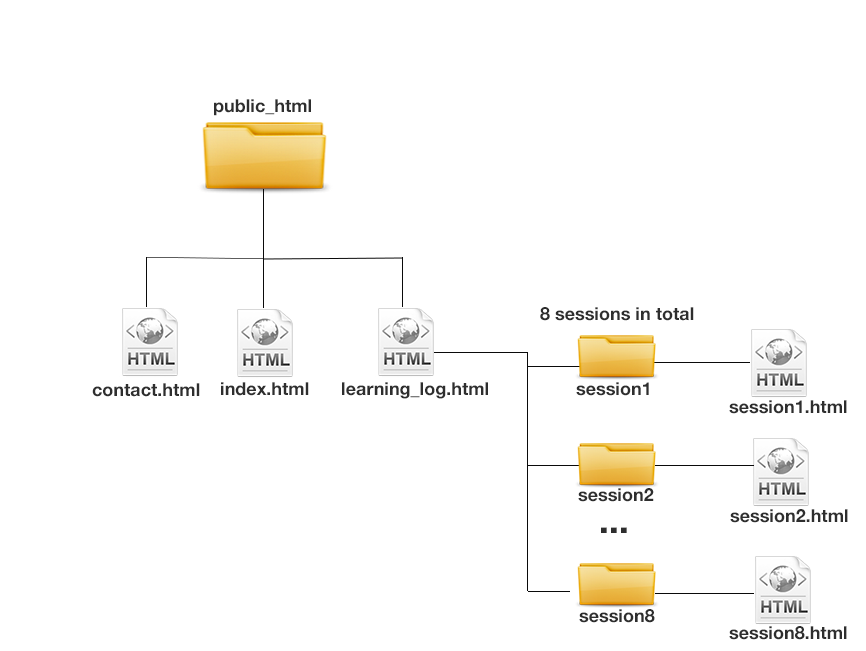
<style>
.page{position:relative;width:866px;height:651px;background:#ffffff}
.page>*{position:absolute;margin:0}
.t1{font:18px "HelveticaNeue-Bold";color:#2e2e2e}
.t2{font:36px "HelveticaNeue-Bold";color:#2e2e2e}
</style>
<div class="page">
<p class="t1" style="left:214px;top:99px;width:97px;height:17px">public_html</p>
<p class="t1" style="left:540px;top:307px;width:154px;height:14px">8 sessions in total</p>
<p class="t1" style="left:92px;top:383px;width:108px;height:14px">contact.html</p>
<p class="t1" style="left:221px;top:382px;width:88px;height:14px">index.html</p>
<p class="t1" style="left:342px;top:382px;width:146px;height:17px">learning_log.html</p>
<p class="t1" style="left:576px;top:382px;width:73px;height:14px">session1</p>
<p class="t1" style="left:729px;top:400px;width:118px;height:14px">session1.html</p>
<p class="t1" style="left:578px;top:488px;width:76px;height:14px">session2</p>
<p class="t1" style="left:730px;top:509px;width:118px;height:14px">session2.html</p>
<p class="t2" style="left:601px;top:527px;width:26px;height:6px">...</p>
<p class="t1" style="left:579px;top:609px;width:76px;height:14px">session8</p>
<p class="t1" style="left:729px;top:626px;width:118px;height:14px">session8.html</p>
</div>
